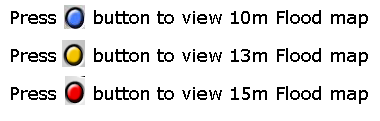
<style>
.page{position:relative;width:380px;height:121px;background:#ffffff}
.page>*{position:absolute;margin:0}
.t1{font:18px "Verdana";color:#000000}
</style>
<div class="page">
<p class="t1" style="left:11px;top:10px;width:357px;height:18px">Press      button to view 10m Flood map</p>
<p class="t1" style="left:11px;top:48px;width:357px;height:18px">Press      button to view 13m Flood map</p>
<p class="t1" style="left:11px;top:86px;width:357px;height:18px">Press      button to view 15m Flood map</p>
</div>
